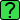
<style>
.page{position:relative;width:20px;height:20px;background:#3bde4e}
.page>*{position:absolute;margin:0}
.t1{font:22px "ArialMT";color:#000000}
</style>
<div class="page">
<p class="t1" style="left:5px;top:2px;width:11px;height:16px">?</p>
</div>
